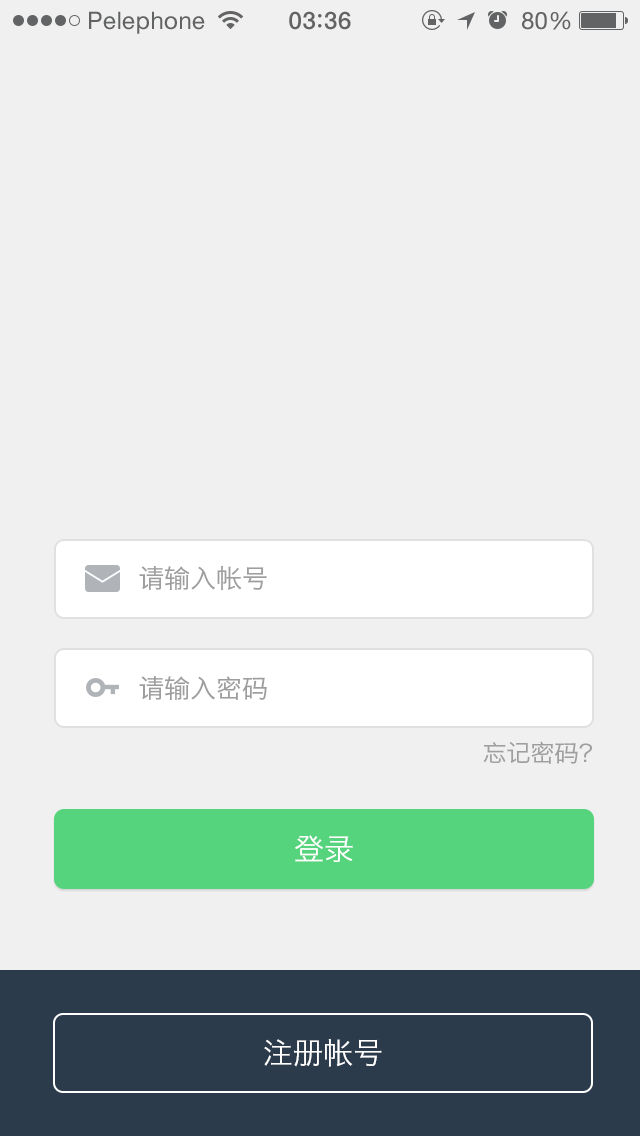
<style>
.page{position:relative;width:640px;height:1136px;background:#f0f0f0}
.page>*{position:absolute;margin:0}
.t1{font:24px "HelveticaNeue";letter-spacing:0.02em;color:#626364}
.t2{font:24px "HelveticaNeue-Medium";letter-spacing:0.03em;color:#626364}
.t3{font:26px "HiraginoSansGB-W3";color:#9e9e9e}
.t4{font:26px "HiraginoSansGB-W3";color:#9d9d9d}
.t5{font:24px "HiraginoSansGB-W3";color:#9e9e9e}
.t6{font:30px "HiraginoSansGB-W3";color:#ffffff}
</style>
<div class="page">
<p class="t1" style="left:89px;top:11px;width:116px;height:23px">Pelephone</p>
<p class="t2" style="left:289px;top:11px;width:62px;height:19px">03 36</p>
<p class="t1" style="left:522px;top:11px;width:49px;height:19px">80%</p>
<p class="t3" style="left:139px;top:566px;width:128px;height:24px">请输入帐号</p>
<p class="t4" style="left:139px;top:676px;width:128px;height:24px">请输入密码</p>
<p class="t5" style="left:483px;top:741px;width:109px;height:23px">忘记密码？</p>
<p class="t6" style="left:295px;top:835px;width:58px;height:27px">登录</p>
<p class="t6" style="left:264px;top:1039px;width:118px;height:28px">注册帐号</p>
</div>
